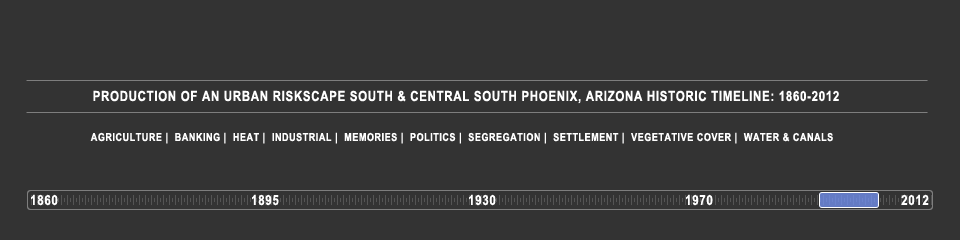
<style>
.page{position:relative;width:960px;height:240px;background:#333333}
.page>*{position:absolute;margin:0}
.t1{font:14px "ArialNarrow-Bold";letter-spacing:0.05em;color:#ffffff;text-transform:uppercase}
.t2{font:11px "ArialNarrow-Bold";letter-spacing:0.05em;color:#ffffff;text-transform:uppercase}
</style>
<div class="page">
<p class="t1" style="left:93px;top:90px;width:746px;height:14px">Production of an Urban Riskscape South &amp; Central South Phoenix, Arizona Historic Timeline: 1860-2012</p>
<p class="t2" style="left:90px;top:132px;width:743px;height:12px">aGRICULTURE |  BANKING |  HEAT |  INDUSTRIAL |  MEMORIES |  POLITICS |  SEGREGATION |  SETTLEMENT |  VEGETATIVE COVER |  WATER &amp; CANALS</p>
</div>
